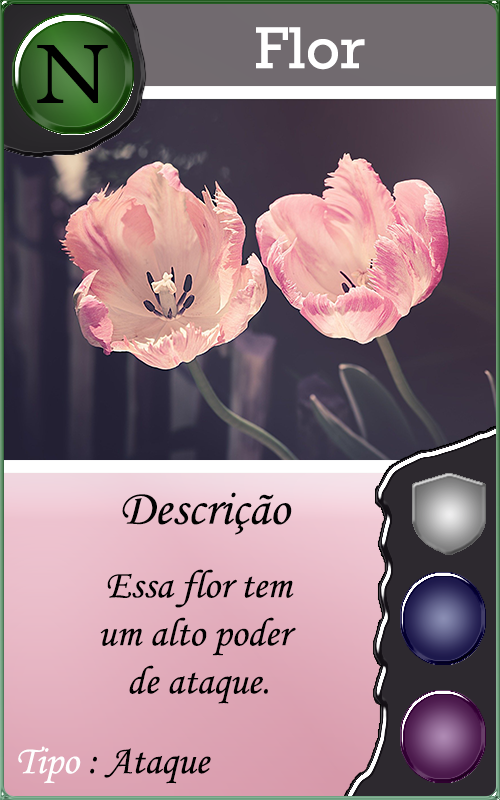
<style>
.page{position:relative;width:500px;height:800px}
.page>*{position:absolute;margin:0}
.t1{font:60px "Rockwell";color:#ffffff}
.t2{font:50px "MonotypeCorsiva";color:#020202}
.t3{font:40px "MonotypeCorsiva";color:#000000}
.t4{font:40px "MonotypeCorsiva";color:#fefefe}
</style>
<div class="page">
<p class="t1" style="left:256px;top:27px;width:109px;height:43px">Flor</p>
<p class="t2" style="left:122px;top:492px;width:170px;height:43px">Descrição</p>
<p class="t3" style="left:100px;top:569px;width:196px;height:135px;text-align:center">Essa flor tem<br>um alto poder <br>de ataque.</p>
<p class="t3" style="left:18px;top:746px;width:193px;height:38px"><span class="t4">Tipo </span>: Ataque</p>
</div>
